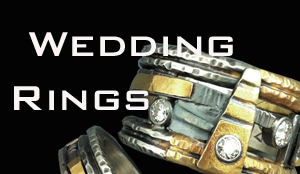
<style>
.page{position:relative;width:300px;height:174px;background:#030303}
.page>*{position:absolute;margin:0}
.t1{font:45.8px "BankGothicBT-Medium";color:#faf5f5}
</style>
<div class="page">
<p class="t1" style="left:28px;top:32px;width:205px;height:24px">Wedding</p>
<p class="t1" style="left:14px;top:86px;width:135px;height:24px">Rings</p>
</div>
